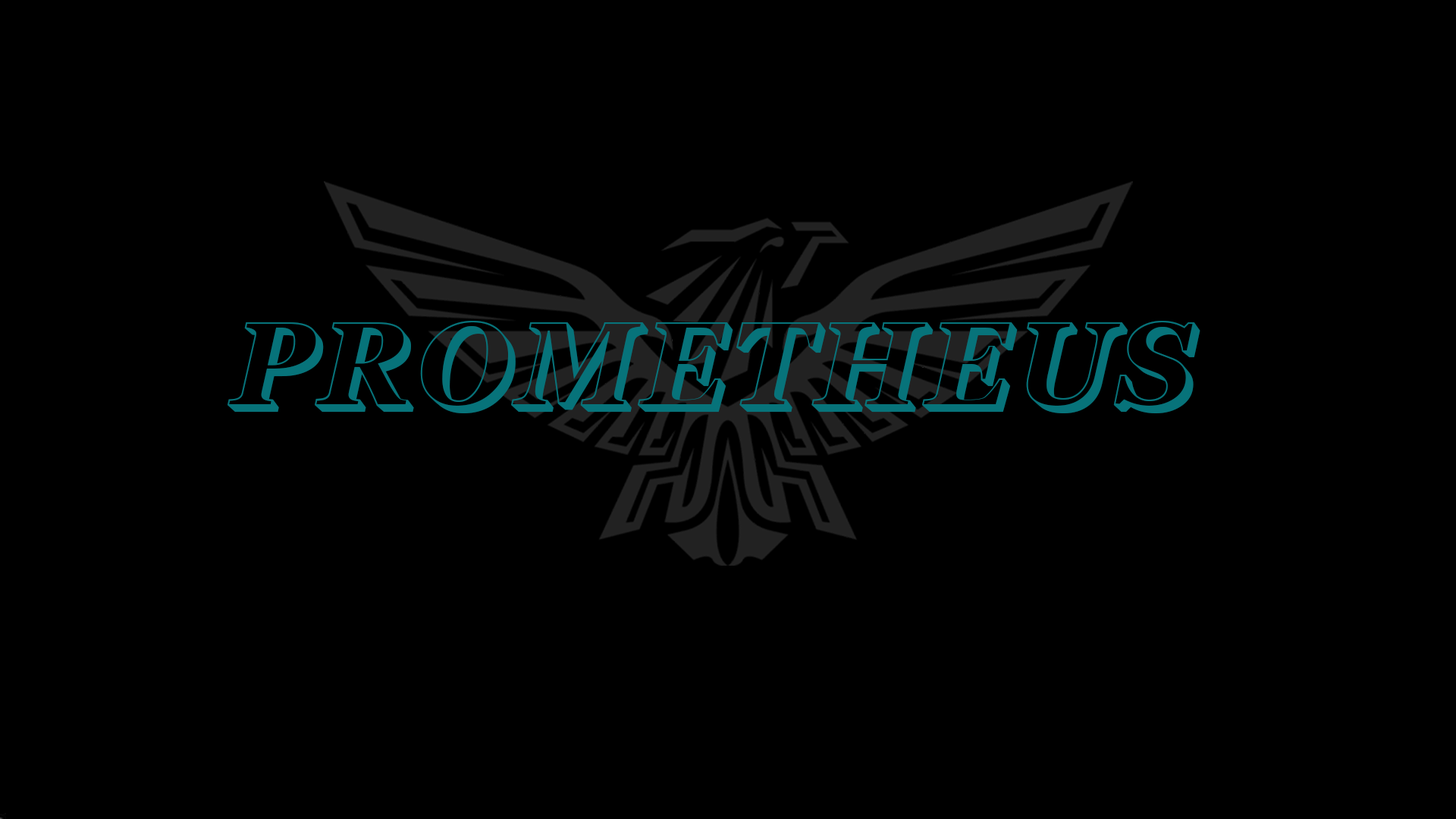
<style>
.page{position:relative;width:1456px;height:819px;background:#000000}
.page>*{position:absolute;margin:0}
.t1{font:116.3px "404error";letter-spacing:0.05em;color:#07737a}
</style>
<div class="page">
<p class="t1" style="left:227px;top:321px;width:973px;height:92px">PROMETHEUS</p>
</div>
